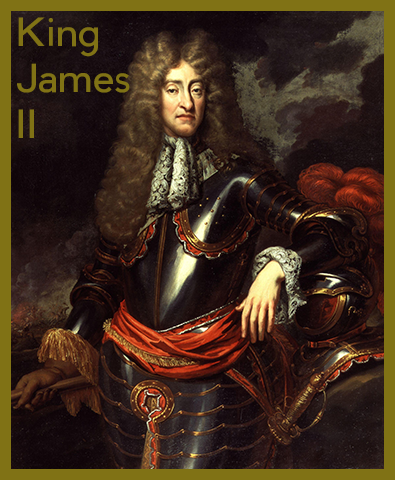
<style>
.page{position:relative;width:395px;height:480px}
.page>*{position:absolute;margin:0}
.t1{font:38px "PierSans";color:#807215}
</style>
<div class="page">
<p class="t1" style="left:17px;top:17px;width:113px;height:121px">King<br>James<br>II</p>
</div>
